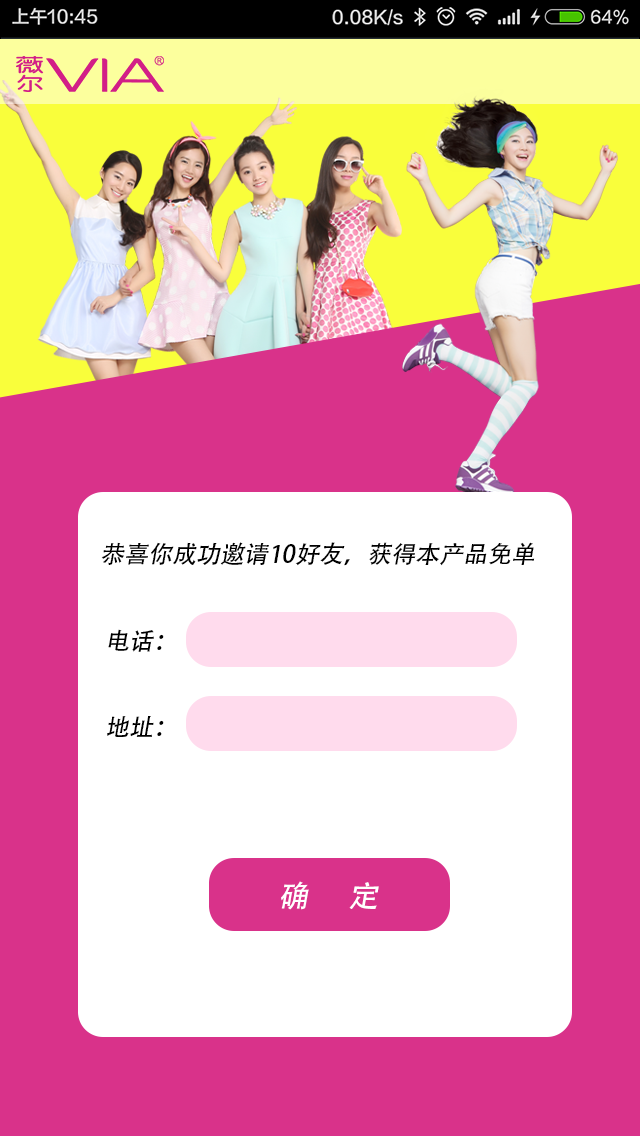
<style>
.page{position:relative;width:640px;height:1136px;background:#d9328a}
.page>*{position:absolute;margin:0}
.t1{font:24px "AdobeHeitiStd-Regular";color:#000000;font-style:italic}
.t2{font:30px "AdobeHeitiStd-Regular";color:#ffffff;font-style:italic}
</style>
<div class="page">
<p class="t1" style="left:101px;top:542px;width:434px;height:195px">恭喜你成功邀请10好友，获得本产品免单<br><br><br> 电话：<br><br><br> 地址：</p>
<p class="t2" style="left:281px;top:881px;width:98px;height:29px">确      定</p>
</div>
